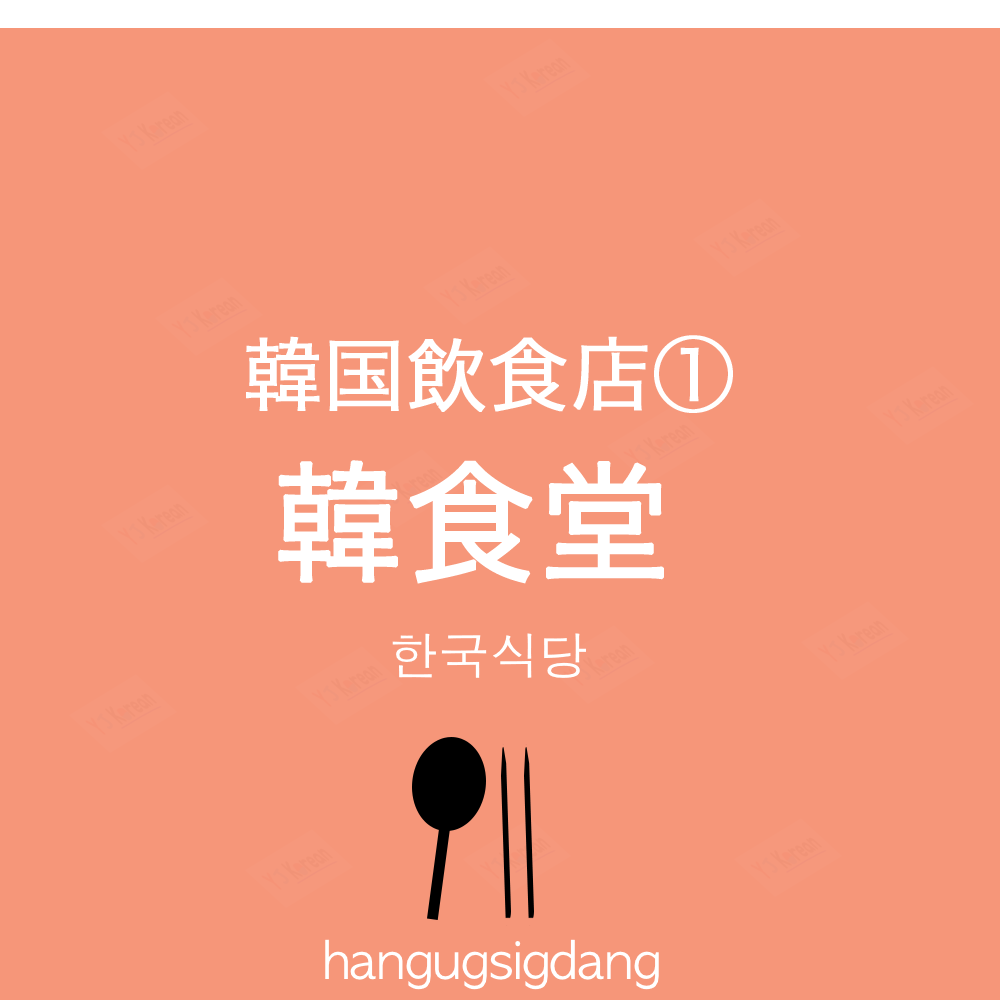
<style>
.page{position:relative;width:1000px;height:1000px;background:#f69679}
.page>*{position:absolute;margin:0}
.t1{font:80px "HiraKakuProN-W3";color:#ffffff;font-weight:bold}
.t2{font:130px "HiraKakuProN-W3";color:#ffffff;font-weight:bold}
.t3{font:50px "AppleGothic";color:#ffffff}
</style>
<div class="page">
<p class="t1" style="left:246px;top:335px;width:487px;height:78px">韓国飲食店①</p>
<p class="t2" style="left:278px;top:460px;width:386px;height:124px">韓食堂</p>
<p class="t3" style="left:392px;top:633px;width:194px;height:45px">한국식당</p>
<p class="t3" style="left:325px;top:939px;width:334px;height:51px">hangugsigdang</p>
</div>
